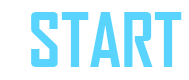
<style>
.page{position:relative;width:189px;height:80px;background:#ffffff}
.page>*{position:absolute;margin:0}
.t1{font:72px "AgencyFB-Bold";color:#58d4ff}
</style>
<div class="page">
<p class="t1" style="left:31px;top:12px;width:151px;height:55px">START</p>
</div>
